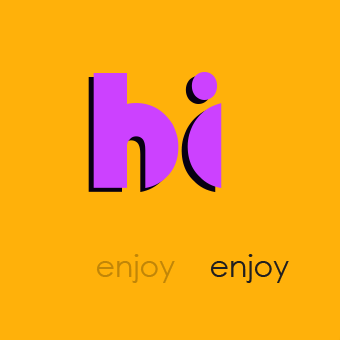
<style>
.page{position:relative;width:340px;height:340px;background:#ffb10a}
.page>*{position:absolute;margin:0}
.t1{font:120px "Fingerpop";color:#080012}
.t2{font:120px "Fingerpop";color:#cc41ff}
.t3{font:30px "CenturyGothic";color:#c18608}
.t4{font:30px "CenturyGothic";color:#211f20}
</style>
<div class="page">
<p class="t1" style="left:88px;top:76px;width:128px;height:116px">hi</p>
<p class="t2" style="left:93px;top:72px;width:129px;height:116px">hi</p>
<p class="t3" style="left:96px;top:254px;width:79px;height:29px">enjoy</p>
<p class="t4" style="left:210px;top:254px;width:79px;height:29px">enjoy</p>
</div>
